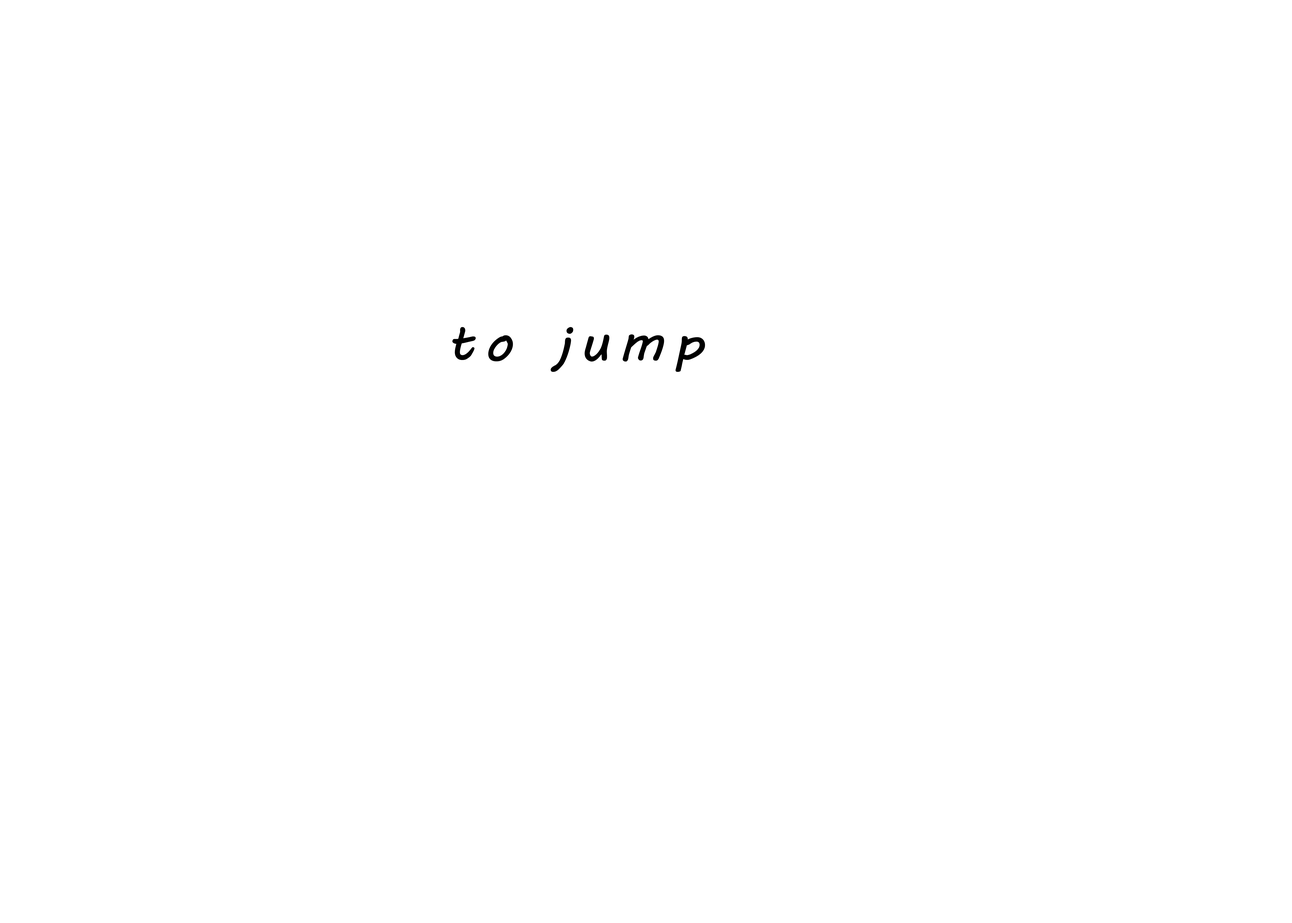
<style>
.page{position:relative;width:1292px;height:923px;background:#ffffff}
.page>*{position:absolute;margin:0}
.t1{font:51.1px "MVBoli";letter-spacing:0.14em;color:#000000;font-weight:bold;scale:1.05 1}
</style>
<div class="page">
<p class="t1" style="left:452px;top:327px;width:253px;height:45px">to jump</p>
</div>
